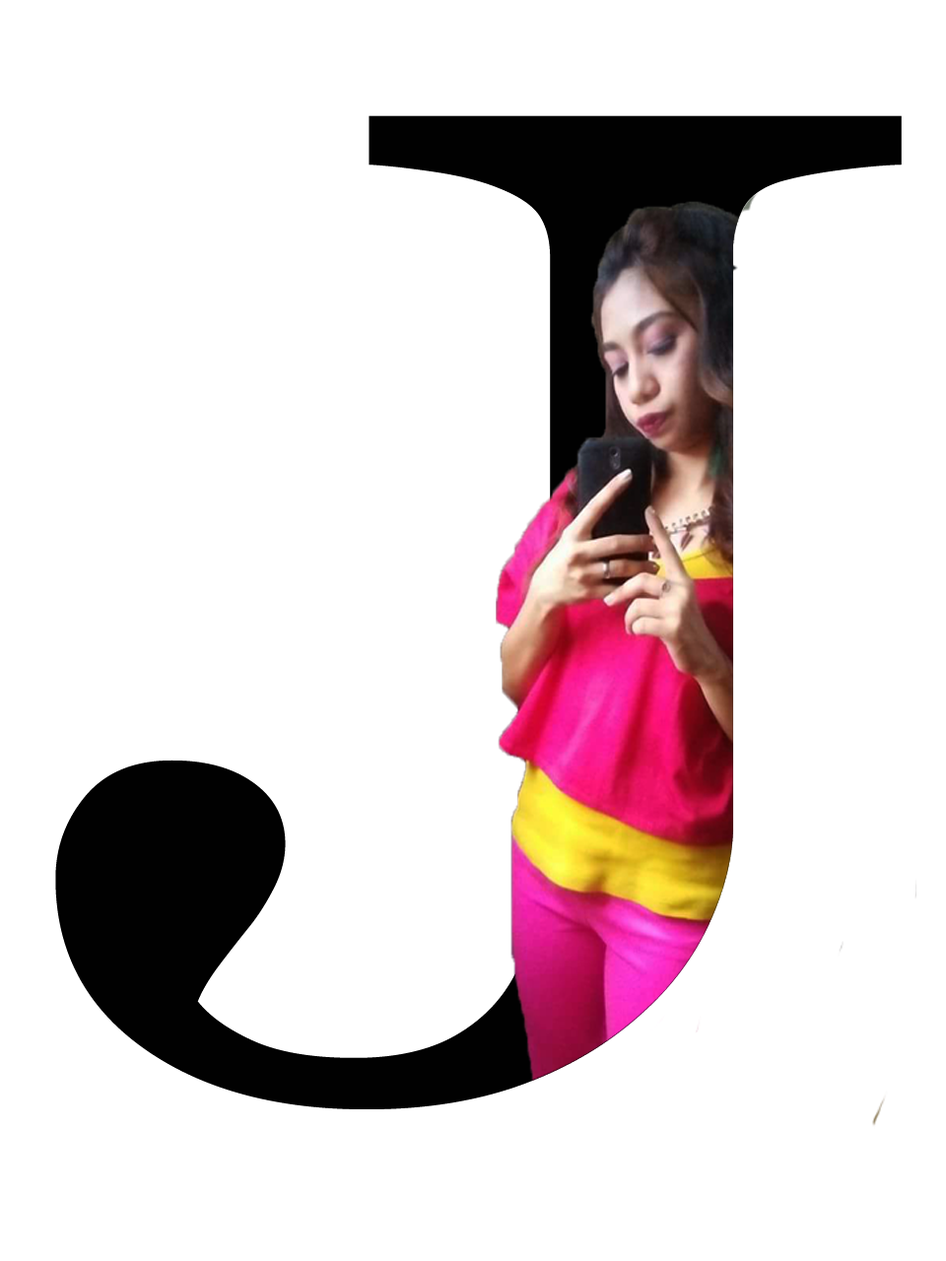
<style>
.page{position:relative;width:946px;height:1261px;background:#ffffff}
.page>*{position:absolute;margin:0}
.t1{font:1398.8px "Georgia";text-transform:uppercase;scale:1.24 1}
</style>
<div class="page">
<p class="t1" style="left:55px;top:115px;width:846px;height:994px">J</p>
</div>
